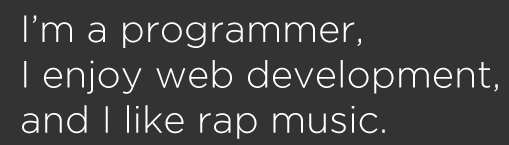
<style>
.page{position:relative;width:509px;height:145px;background:#333333}
.page>*{position:absolute;margin:0}
.t1{font:37.8px "GothamLight";color:#ffffff}
</style>
<div class="page">
<p class="t1" style="left:22px;top:15px;width:476px;height:124px">I’m a programmer, <br>I enjoy web development,<br>and I like rap music.</p>
</div>
